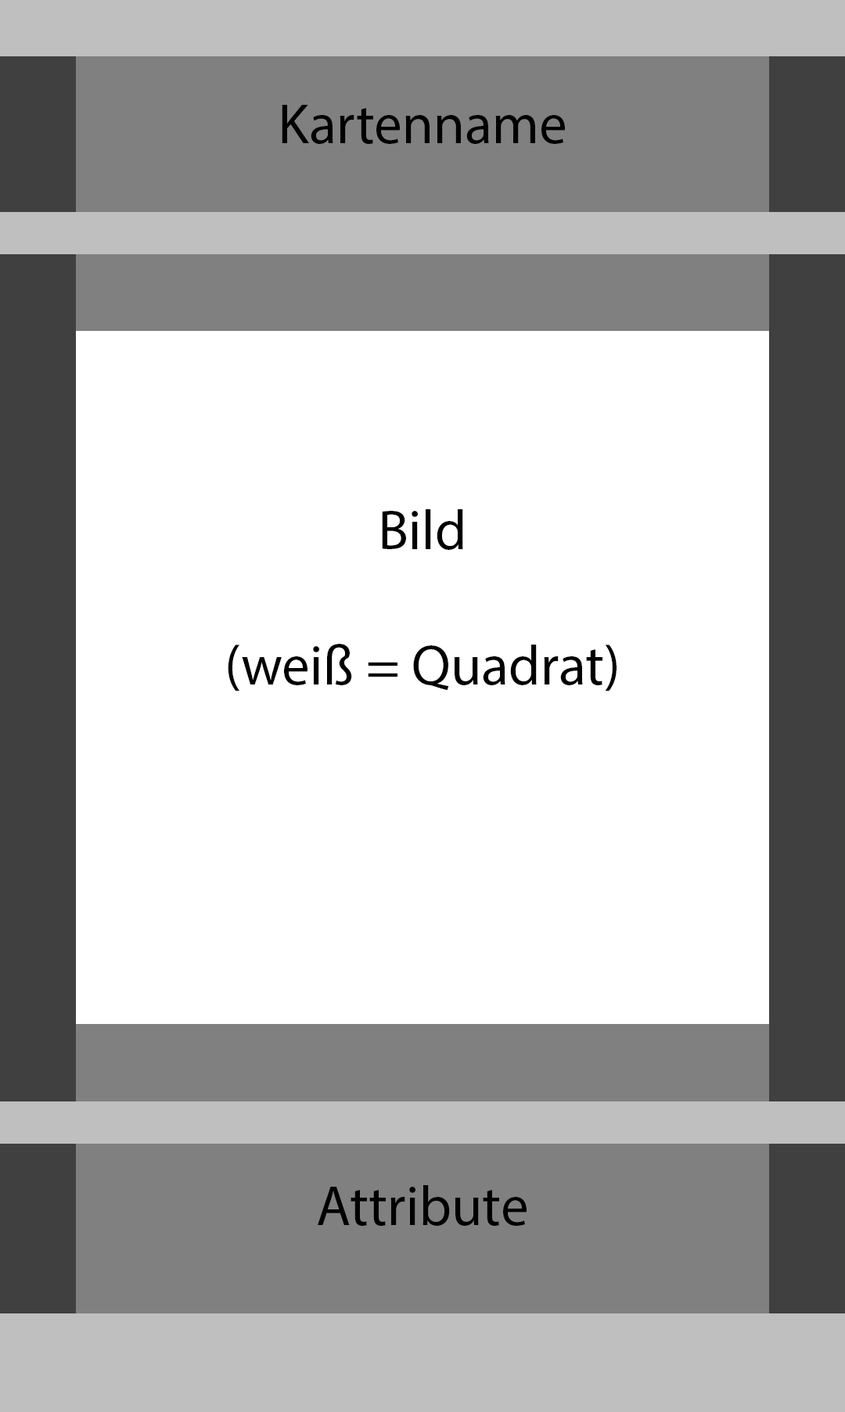
<style>
.page{position:relative;width:845px;height:1412px;background:#ffffff}
.page>*{position:absolute;margin:0}
.t1{font:56.3px "MyriadPro-Regular";color:#000000}
</style>
<div class="page">
<p class="t1" style="left:228px;top:105px;width:388px;height:1121px;text-align:center">Kartenname<br><br><br><br><br><br>Bild<br><br>(weiß = Quadrat)<br><br><br><br><br><br><br><br>Attribute</p>
</div>
